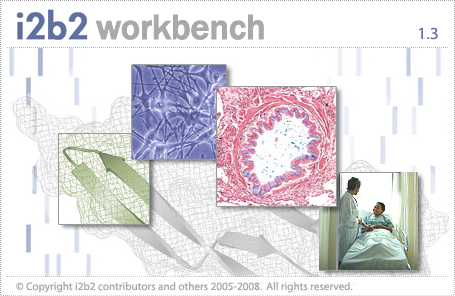
<style>
.page{position:relative;width:455px;height:296px;background:#ffffff}
.page>*{position:absolute;margin:0}
.t1{font:17px "Myriad-Roman";letter-spacing:0.008em;color:#6776a2}
.t2{font:11px "Myriad-Roman";letter-spacing:0.008em;color:#a9a9a9}
</style>
<div class="page">
<p class="t1" style="left:419px;top:27px;width:19px;height:13px">1.3</p>
<p class="t2" style="left:16px;top:282px;width:337px;height:11px">© Copyright i2b2 contributors and others 2005-2008.  All rights reserved.</p>
</div>
